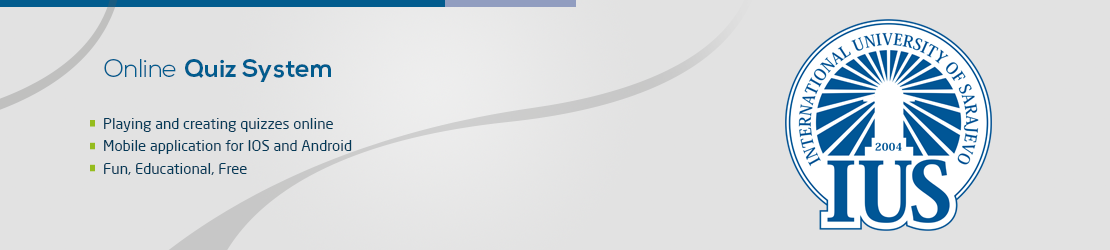
<style>
.page{position:relative;width:1110px;height:250px;background:#e2e2e2}
.page>*{position:absolute;margin:0}
.t1{font:25px "NexaBold";color:#025c8e}
.t2{font:25px "NexaLight";color:#025c8e}
.t3{font:15px/21.7px "NeoSansPro-Regular";color:#043a58}
.t4{font:15px "NeoSansPro-Regular";color:#043a58}
.t5{font:15px "NeoSansTR";color:#043a58}
</style>
<div class="page">
<p class="t1" style="left:104px;top:59px;width:227px;height:23px"><span class="t2">Online </span>Quiz System</p>
<p class="t3" style="left:104px;top:118px;width:248px;height:36px">Playing and creating quizzes online<br>Mobile application for IOS and Android</p>
<p class="t4" style="left:104px;top:163px;width:143px;height:12px"><span class="t5"><br></span>Fun, Educational, Free</p>
</div>
